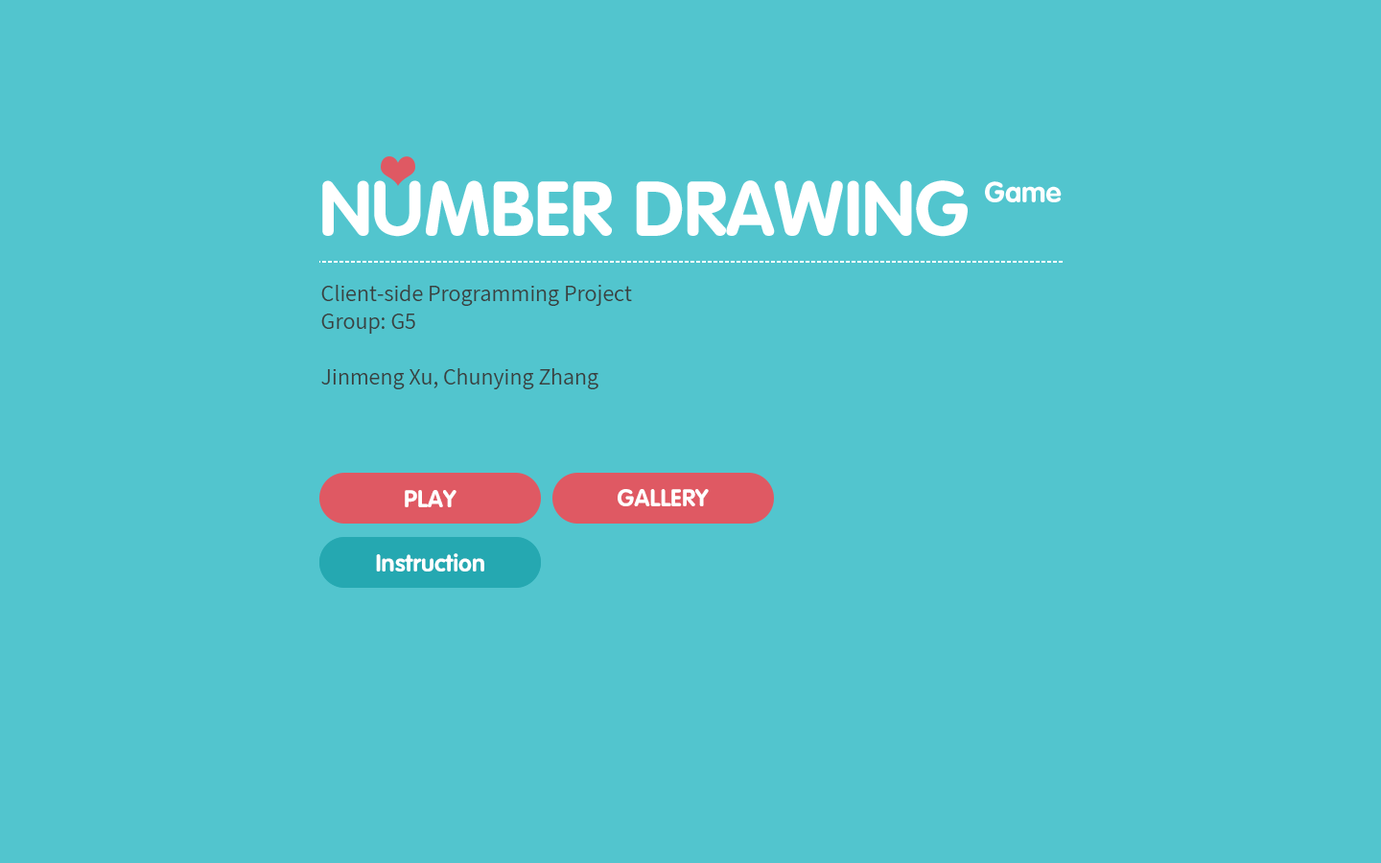
<style>
.page{position:relative;width:1381px;height:863px;background:#52c5ce}
.page>*{position:absolute;margin:0}
.t1{font:23px "Assistant-Regular";color:#3a403f}
.t2{font:24px "FZY4JW--GB1-0";letter-spacing:0.01em;color:#ffffff}
.t3{font:24px "FZY4JW--GB1-0";letter-spacing:0.01em;color:#ffffff;text-transform:uppercase}
</style>
<div class="page">
<p class="t1" style="left:321px;top:285px;width:311px;height:104px">Client-side Programming Project<br>Group: G5<br><br>Jinmeng Xu, Chunying Zhang</p>
<p class="t2" style="left:405px;top:490px;width:52px;height:17px">PLAY</p>
<p class="t3" style="left:618px;top:489px;width:91px;height:17px">Gallery</p>
<p class="t2" style="left:376px;top:553px;width:108px;height:19px">Instruction</p>
</div>
